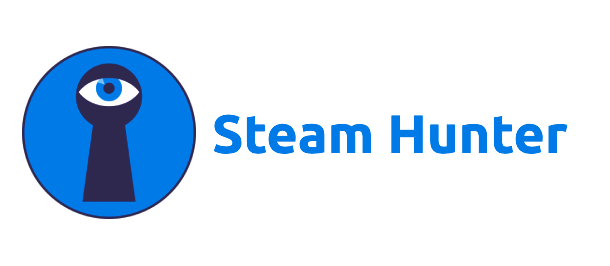
<style>
.page{position:relative;width:610px;height:266px;background:#ffffff}
.page>*{position:absolute;margin:0}
.t1{font:54px "Ubuntu-Bold";color:#007ae6}
</style>
<div class="page">
<p class="t1" style="left:213px;top:114px;width:355px;height:40px">Steam Hunter</p>
</div>
